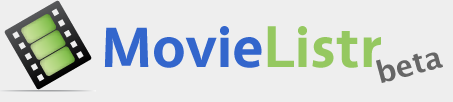
<style>
.page{position:relative;width:453px;height:102px;background:#eeeeee}
.page>*{position:absolute;margin:0}
.t1{font:60px "Vegur-Bold";color:#3366cc}
.t2{font:60px "Vegur-Bold";color:#95c860}
.t3{font:30px "LucidaGrande-Bold";color:#666666}
</style>
<div class="page">
<p class="t1" style="left:104px;top:26px;width:277px;height:42px">Movie<span class="t2">Listr</span></p>
<p class="t3" style="left:376px;top:52px;width:67px;height:31px;rotate:-15deg">beta</p>
</div>
